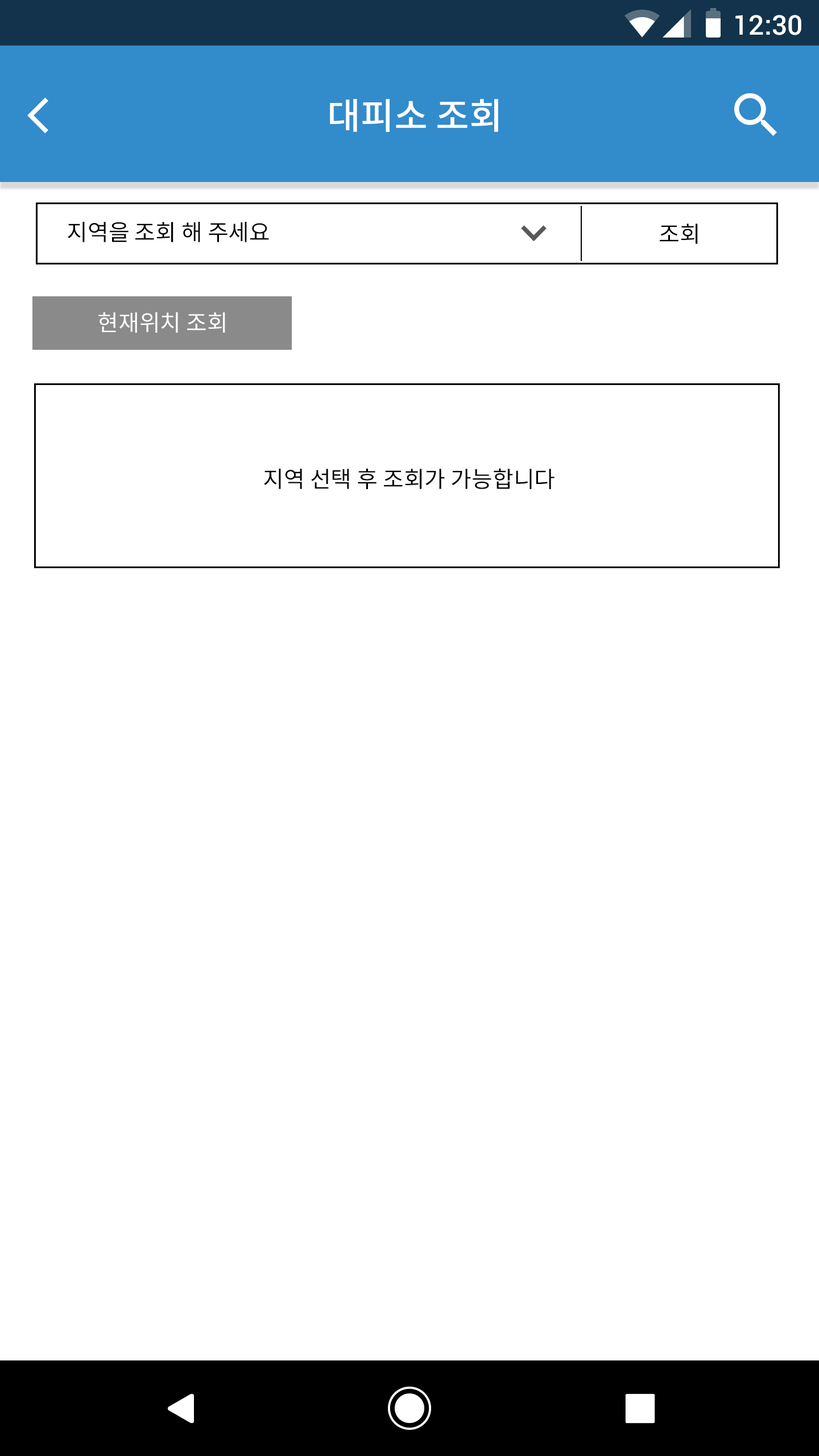
<style>
.page{position:relative;width:819px;height:1456px;background:#ffffff}
.page>*{position:absolute;margin:0}
.t1{font:27.3px "Roboto-Medium";color:#ffffff}
.t2{font:36.4px "NotoSansCJKkr-Medium";color:#ffffff}
.t3{font:22.7px "NotoSansCJKkr-Regular";color:#000000}
.t4{font:22.7px "NotoSansCJKkr-Regular";color:#ffffff}
</style>
<div class="page">
<p class="t1" style="left:735px;top:15px;width:66px;height:20px">12:30</p>
<p class="t2" style="left:330px;top:99px;width:168px;height:33px">대피소 조회</p>
<p class="t3" style="left:68px;top:222px;width:201px;height:20px">지역을 조회 해 주세요</p>
<p class="t3" style="left:660px;top:224px;width:38px;height:20px">조회</p>
<p class="t4" style="left:98px;top:312px;width:127px;height:21px">현재위치 조회</p>
<p class="t3" style="left:264px;top:468px;width:291px;height:21px">지역 선택 후 조회가 가능합니다</p>
</div>
